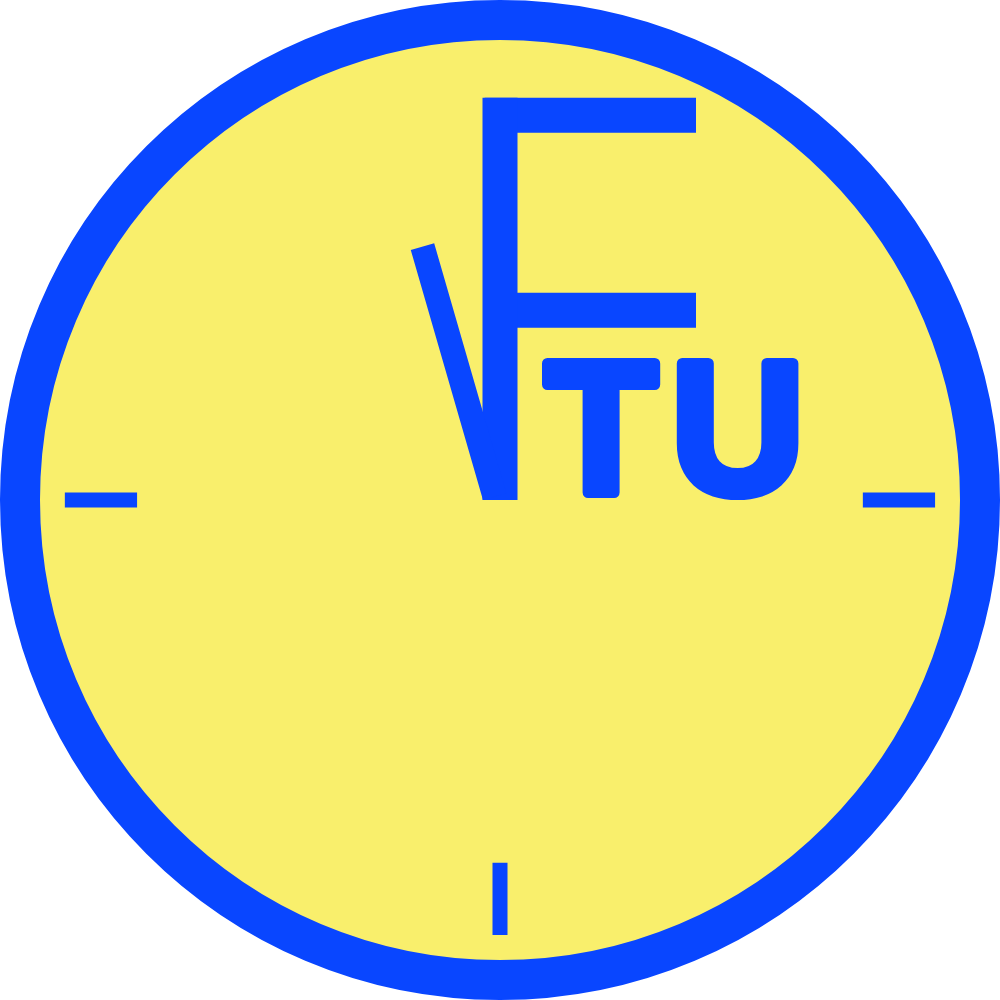
<style>
.page{position:relative;width:1000px;height:1000px;background:#f9ef6c}
.page>*{position:absolute;margin:0}
.t1{font:200px "Rubik-Bold";color:#0946ff}
</style>
<div class="page">
<p class="t1" style="left:542px;top:358px;width:257px;height:142px">TU</p>
</div>
